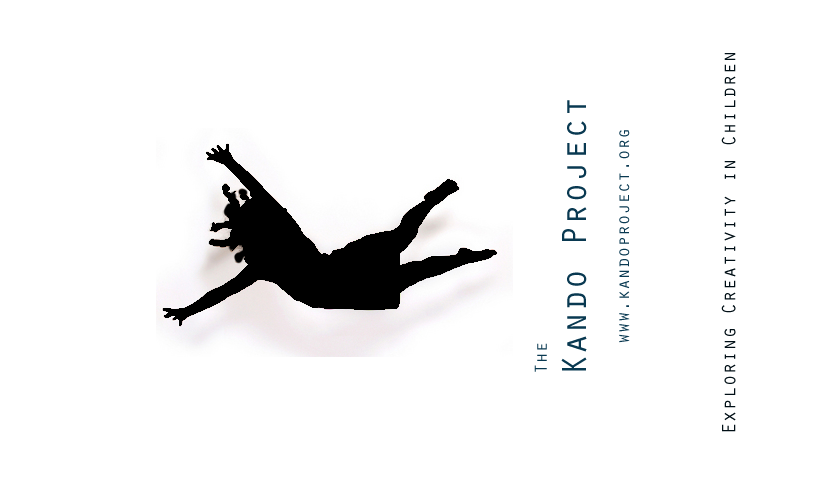
<style>
.page{position:relative;width:839px;height:482px;background:#ffffff}
.page>*{position:absolute;margin:0}
.t1{font:20px "OratorStd";color:#010f16}
.t2{font:18px "OratorStd";color:#093951}
.t3{font:36px "OratorStd";color:#093951}
</style>
<div class="page">
<p class="t1" style="left:721px;top:53px;width:15px;height:379px;rotate:-90deg">Exploring Creativity in Children</p>
<p class="t2" style="left:561px;top:100px;width:69px;height:271px;text-align:center;rotate:-90deg"><span class="t3">Kando Project<br></span><br>www.kandoproject.org</p>
<p class="t2" style="left:534px;top:343px;width:13px;height:29px;rotate:-90deg">The</p>
</div>
